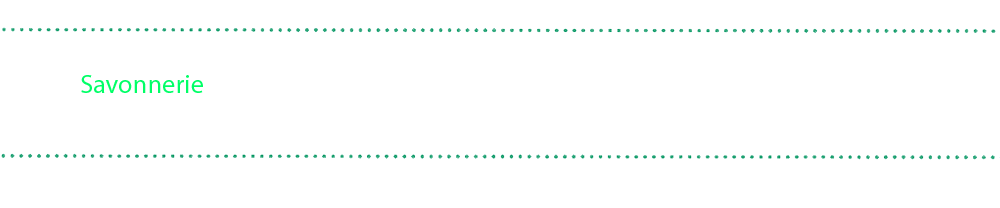
<style>
.page{position:relative;width:1000px;height:208px;background:#ffffff}
.page>*{position:absolute;margin:0}
.t1{font:26.5px "MyriadPro-Regular";color:#00ff66}
</style>
<div class="page">
<p class="t1" style="left:81px;top:75px;width:122px;height:18px">Savonnerie</p>
</div>
